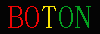
<style>
.page{position:relative;width:100px;height:34px;background:#040404}
.page>*{position:absolute;margin:0}
.t1{font:33.3px "SimSun";color:#ef0404}
.t2{font:33.3px "SimSun";color:#fae504}
.t3{font:33.3px "SimSun";color:#04a01f}
</style>
<div class="page">
<p class="t1" style="left:8px;top:6px;width:83px;height:22px">BO<span class="t2">T</span><span class="t3">ON</span></p>
</div>
